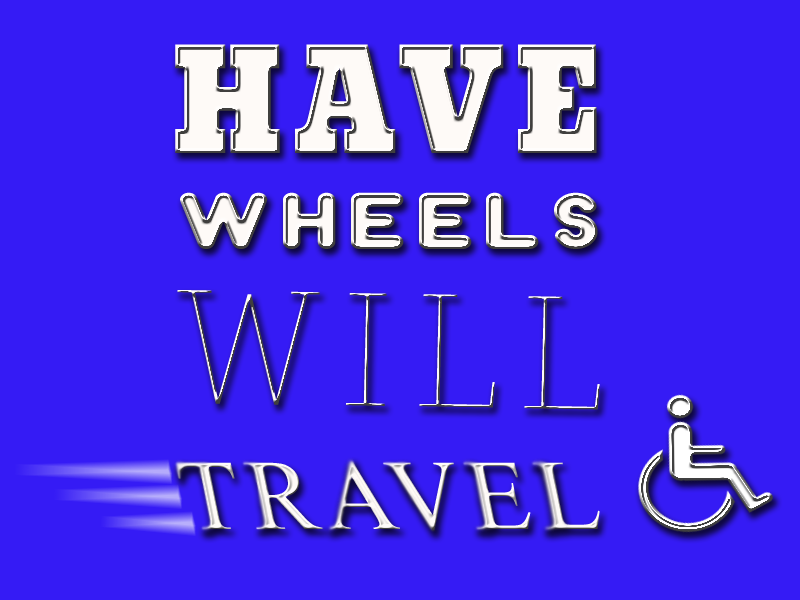
<style>
.page{position:relative;width:800px;height:600px;background:#351bf5}
.page>*{position:absolute;margin:0}
.t1{font:137.1px "Bevan";letter-spacing:0.075em;color:#fefaf7;scale:0.92 1}
.t2{font:72.1px "Dunkin";letter-spacing:0.075em;color:#fefaf7;scale:1.24 1}
.t3{font:159.8px "HaginCapsThin";letter-spacing:0.075em;scale:1.32 1}
</style>
<div class="page">
<p class="t1" style="left:175px;top:44px;width:422px;height:109px">HAVE</p>
<p class="t2" style="left:180px;top:192px;width:418px;height:57px">WHEELS</p>
<p class="t3" style="left:177px;top:290px;width:423px;height:120px;rotate:1deg">WILL</p>
</div>
